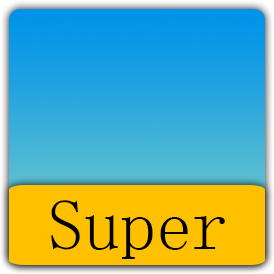
<style>
.page{position:relative;width:274px;height:274px;background:#ffc000}
.page>*{position:absolute;margin:0}
.t1{font:72px "SimSun";color:#000000}
</style>
<div class="page">
<p class="t1" style="left:51px;top:200px;width:174px;height:59px">Super</p>
</div>
